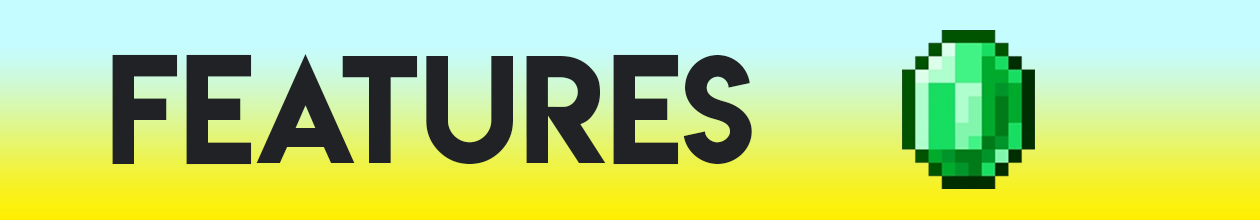
<style>
.page{position:relative;width:1260px;height:220px}
.page>*{position:absolute;margin:0}
.t1{font:136px "LemonMilk";color:#202225}
</style>
<div class="page">
<p class="t1" style="left:112px;top:54px;width:640px;height:111px">features</p>
</div>
